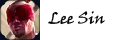
<style>
.page{position:relative;width:140px;height:40px;background:#ffffff}
.page>*{position:absolute;margin:0}
.t1{font:12px "VinerHandITC";color:#000000}
</style>
<div class="page">
<p class="t1" style="left:48px;top:11px;width:57px;height:14px">Lee Sin</p>
</div>
